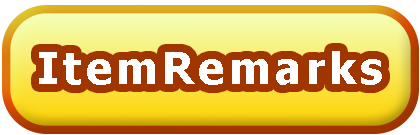
<style>
.page{position:relative;width:420px;height:135px}
.page>*{position:absolute;margin:0}
.t1{font:43.7px "Tahoma-Bold";letter-spacing:0.1em;color:#ffffff}
</style>
<div class="page">
<p class="t1" style="left:39px;top:51px;width:343px;height:34px">ItemRemarks</p>
</div>
